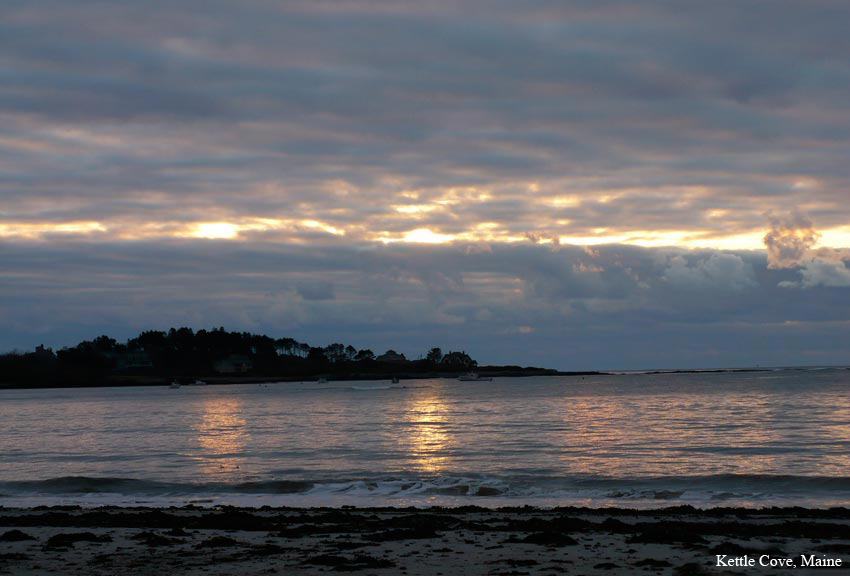
<style>
.page{position:relative;width:850px;height:576px}
.page>*{position:absolute;margin:0}
.t1{font:16px "TimesNewRomanPSMT";color:#ffffff}
</style>
<div class="page">
<p class="t1" style="left:716px;top:555px;width:126px;height:13px">Kettle Cove, Maine</p>
</div>
